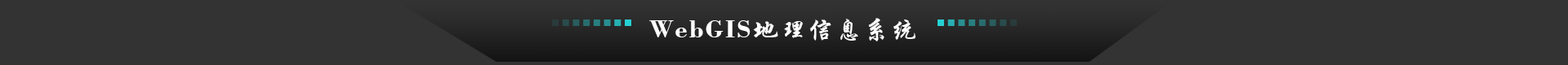
<style>
.page{position:relative;width:1568px;height:65px;background:#333333}
.page>*{position:absolute;margin:0}
.t1{font:26.1px "BodoniBT-Bold";letter-spacing:0.06em;color:#ffffff}
.t2{font:26.1px "STXingkai";letter-spacing:0.06em;color:#ffffff}
</style>
<div class="page">
<p class="t1" style="left:649px;top:18px;width:266px;height:24px">WebGIS<span class="t2">地理信息系统</span></p>
</div>
